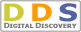
<style>
.page{position:relative;width:81px;height:32px;background:#ffffff}
.page>*{position:absolute;margin:0}
.t1{font:24px "TahomaSmallCap-Bold";letter-spacing:0.19em;color:#cdcc34;scale:1.25 1}
.t2{font:24px "TahomaSmallCap-Bold";letter-spacing:0.19em;color:#ff9a00;scale:1.25 1}
.t3{font:24px "TahomaSmallCap-Bold";letter-spacing:0.19em;color:#5364a1;scale:1.25 1}
.t4{font:7.2px "TahomaSmallCap-Bold";letter-spacing:-0.04em;color:#7a7a7b;scale:1.11 1}
</style>
<div class="page">
<p class="t1" style="left:4px;top:3px;width:73px;height:19px">D<span class="t2">D</span><span class="t3">S</span></p>
<p class="t4" style="left:4px;top:22px;width:73px;height:6px">Digital Discovery</p>
</div>
